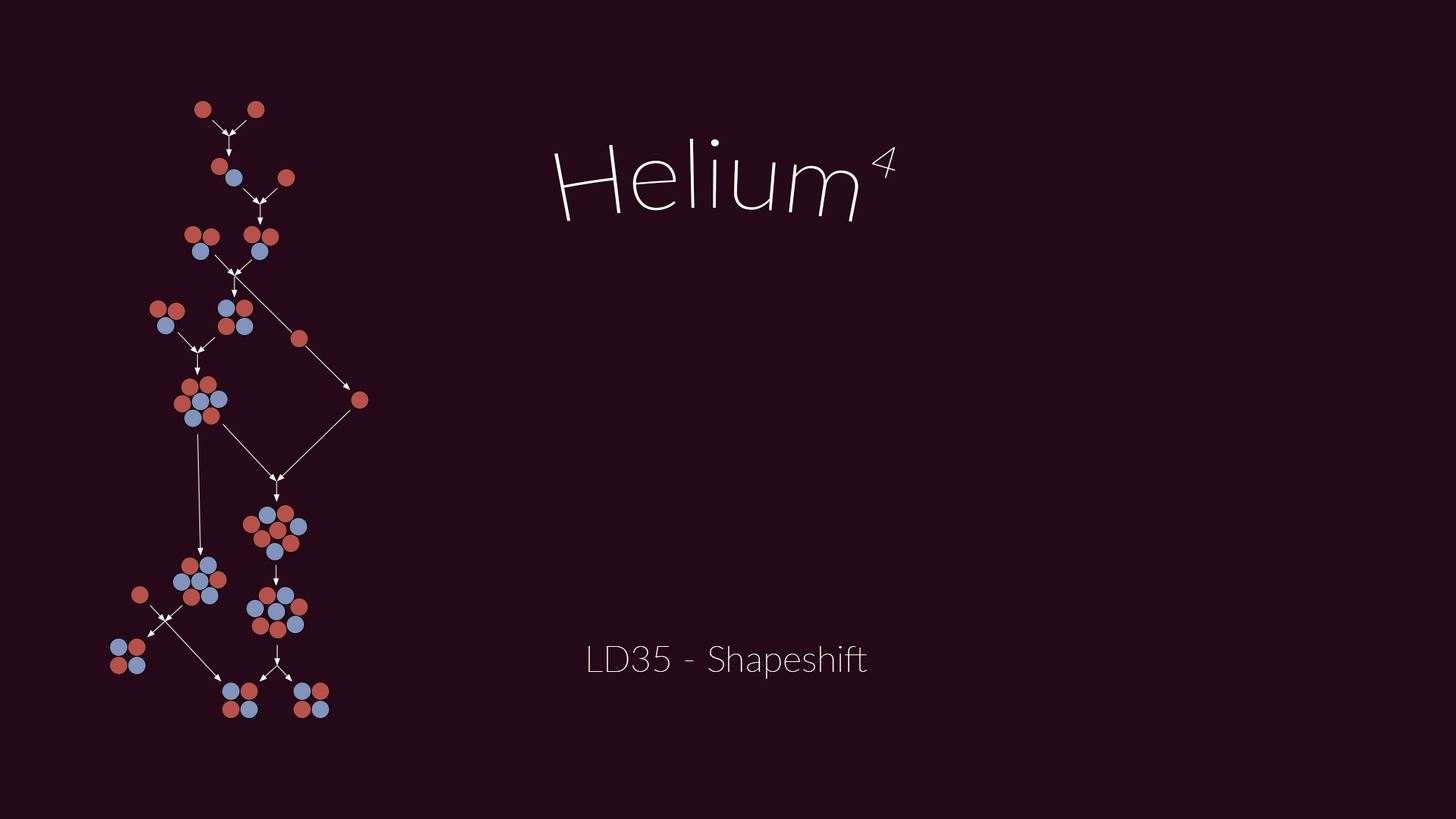
<style>
.page{position:relative;width:1456px;height:819px;background:#250918}
.page>*{position:absolute;margin:0}
.t1{font:97.1px "Lato-Thin";color:#ffffff}
.t2{font:45.5px "Lato-Thin";color:#ffffff}
.t3{font:36.4px "Lato-Thin";color:#ffffff}
</style>
<div class="page">
<p class="t1" style="left:554px;top:138px;width:304px;height:84px">Helium</p>
<p class="t2" style="left:872px;top:147px;width:24px;height:31px;rotate:16deg">4</p>
<p class="t3" style="left:588px;top:646px;width:279px;height:33px">LD35 - Shapeshift</p>
</div>
